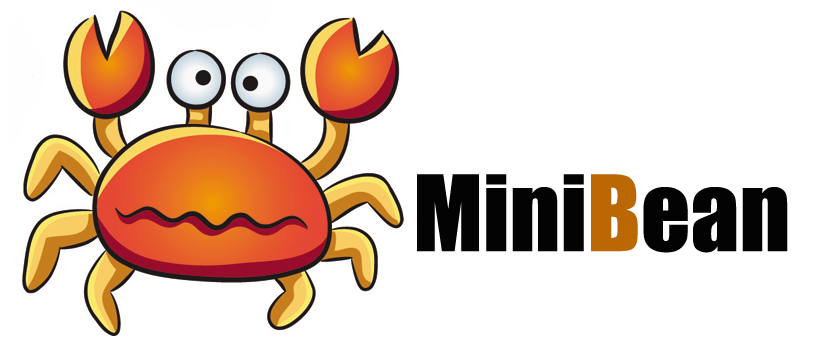
<style>
.page{position:relative;width:813px;height:352px;background:#ffffff}
.page>*{position:absolute;margin:0}
.t1{font:97.2px "Impact";color:#030303}
.t2{font:97.2px "Impact";color:#ba6704}
</style>
<div class="page">
<p class="t1" style="left:417px;top:174px;width:371px;height:79px">Mini<span class="t2">B</span>ean</p>
</div>
